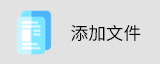
<style>
.page{position:relative;width:160px;height:64px;background:#e2e2e2}
.page>*{position:absolute;margin:0}
.t1{font:17.6px "Sarasa-Gothic-SC-Regular";color:#000000}
</style>
<div class="page">
<p class="t1" style="left:71px;top:25px;width:70px;height:16px">添加文件</p>
</div>
